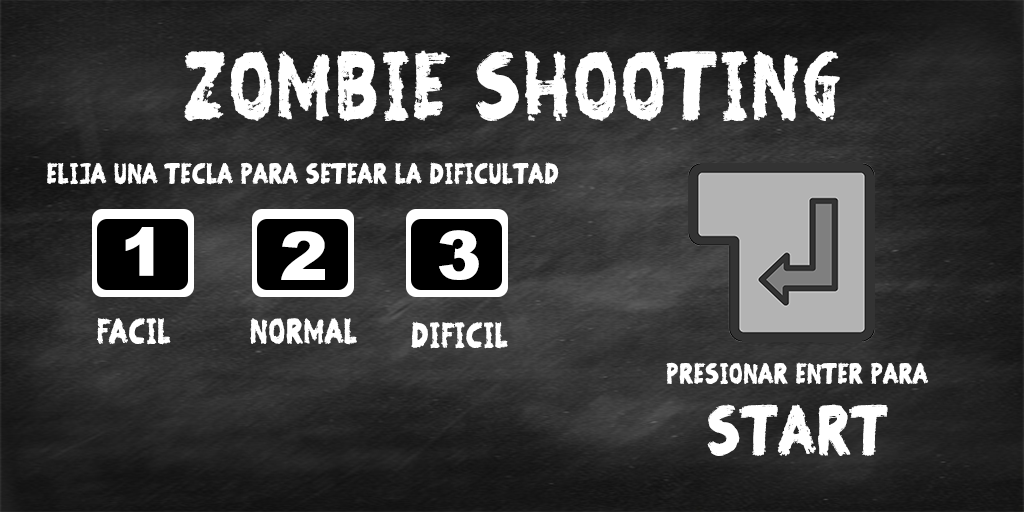
<style>
.page{position:relative;width:1024px;height:512px}
.page>*{position:absolute;margin:0}
.t1{font:83.3px "BewareoftheZombies";letter-spacing:0.05em;color:#ffffff}
.t2{font:25px "BewareoftheZombies";letter-spacing:0.05em;color:#ffffff}
.t3{font:66.7px "Arial-Black";letter-spacing:0.05em;color:#ffffff}
.t4{font:66.7px "Arial-Black";letter-spacing:0.05em;color:#ffffff;scale:1.09 1}
.t5{font:30.6px "BewareoftheZombies";letter-spacing:0.05em;color:#ffffff}
.t6{font:61.1px "BewareoftheZombies";letter-spacing:0.05em;color:#ffffff}
</style>
<div class="page">
<p class="t1" style="left:184px;top:50px;width:656px;height:71px">Zombie Shooting</p>
<p class="t2" style="left:47px;top:162px;width:512px;height:23px">Elija una tecla para setear la dificultad</p>
<p class="t3" style="left:125px;top:227px;width:29px;height:49px">1</p>
<p class="t4" style="left:281px;top:231px;width:44px;height:49px">2</p>
<p class="t3" style="left:439px;top:230px;width:40px;height:50px">3</p>
<p class="t5" style="left:97px;top:318px;width:74px;height:27px">facil</p>
<p class="t5" style="left:250px;top:318px;width:107px;height:27px">Normal</p>
<p class="t5" style="left:411px;top:321px;width:97px;height:28px">dificil</p>
<p class="t2" style="left:666px;top:362px;width:263px;height:23px">presionar enter para</p>
<p class="t6" style="left:707px;top:404px;width:181px;height:52px">Start</p>
</div>
